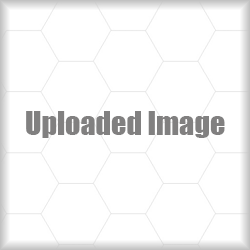
<style>
.page{position:relative;width:250px;height:250px;background:#ffffff}
.page>*{position:absolute;margin:0}
.t1{font:30px "Impact";color:#818080}
</style>
<div class="page">
<p class="t1" style="left:26px;top:111px;width:199px;height:27px">Uploaded Image</p>
</div>
